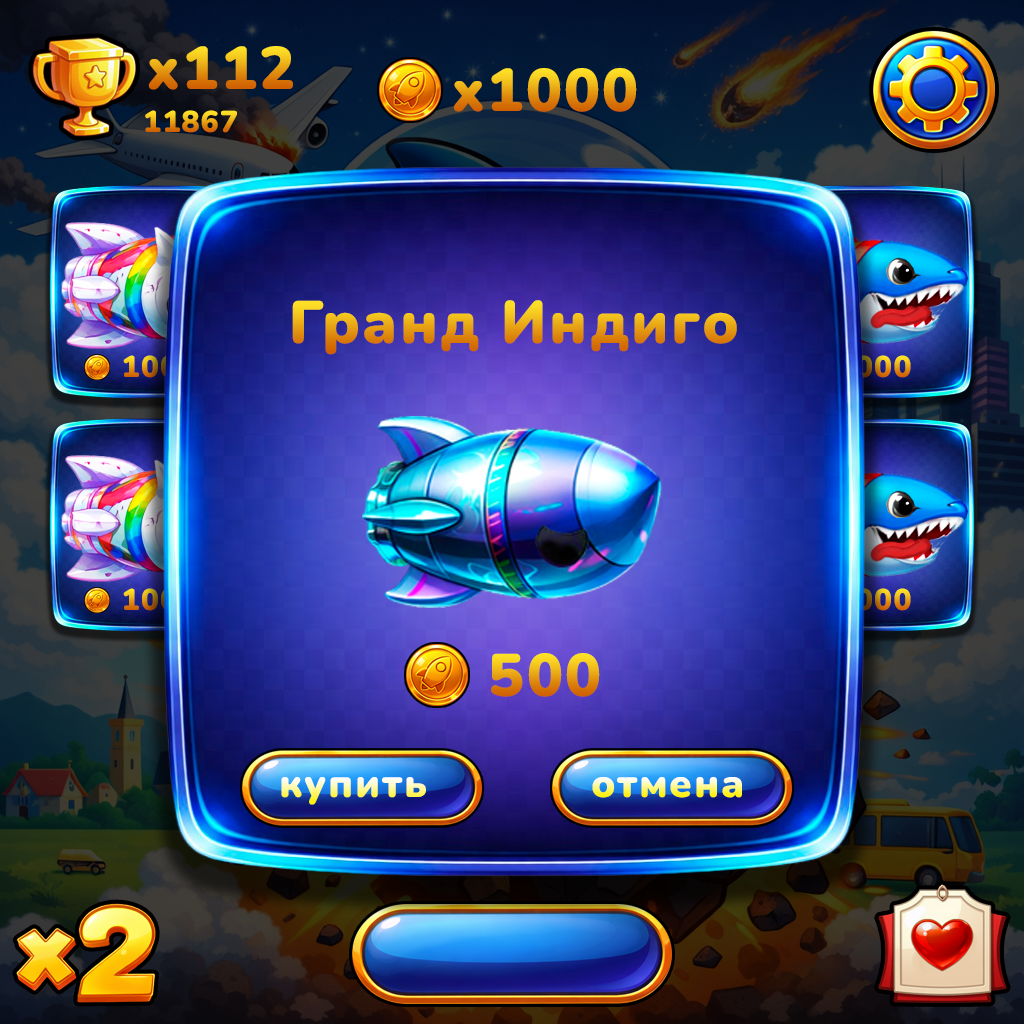
<style>
.page{position:relative;width:1024px;height:1024px}
.page>*{position:absolute;margin:0}
.t1{font:60px "Nunito-Black";letter-spacing:0.04em}
.t2{font:30px "Nunito-Black";letter-spacing:0.04em}
.t3{font:40px "Nunito-Black";letter-spacing:0.04em}
</style>
<div class="page">
<p class="t1" style="left:148px;top:46px;width:145px;height:44px">x112</p>
<p class="t1" style="left:453px;top:68px;width:184px;height:44px">x1000</p>
<p class="t2" style="left:145px;top:110px;width:92px;height:23px">11867</p>
<p class="t1" style="left:292px;top:300px;width:445px;height:55px">Гранд Индиго</p>
<p class="t2" style="left:123px;top:355px;width:74px;height:23px">1000</p>
<p class="t2" style="left:837px;top:355px;width:74px;height:23px">1000</p>
<p class="t2" style="left:123px;top:588px;width:74px;height:23px">1000</p>
<p class="t2" style="left:837px;top:588px;width:74px;height:23px">1000</p>
<p class="t1" style="left:491px;top:653px;width:109px;height:44px">500</p>
<p class="t3" style="left:281px;top:777px;width:145px;height:28px">купить</p>
<p class="t3" style="left:592px;top:777px;width:150px;height:21px">отмена</p>
</div>
